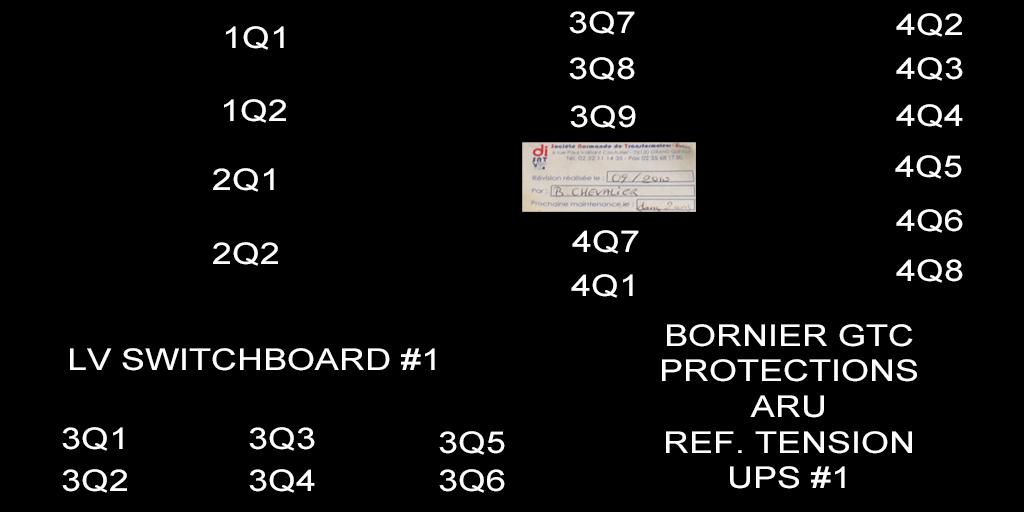
<style>
.page{position:relative;width:1024px;height:512px;background:#000000}
.page>*{position:absolute;margin:0}
.t1{font:30px "ArialMT";color:#ffffff;scale:1.2 1}
.t2{font:30px/35.7px "ArialMT";color:#ffffff;scale:1.2 1}
</style>
<div class="page">
<p class="t1" style="left:569px;top:11px;width:66px;height:24px">3Q7</p>
<p class="t1" style="left:896px;top:13px;width:66px;height:24px">4Q2</p>
<p class="t1" style="left:226px;top:26px;width:58px;height:24px">1Q1</p>
<p class="t1" style="left:569px;top:57px;width:66px;height:24px">3Q8</p>
<p class="t1" style="left:896px;top:57px;width:67px;height:24px">4Q3</p>
<p class="t1" style="left:224px;top:99px;width:62px;height:24px">1Q2</p>
<p class="t1" style="left:570px;top:105px;width:66px;height:24px">3Q9</p>
<p class="t1" style="left:896px;top:104px;width:67px;height:24px">4Q4</p>
<p class="t1" style="left:895px;top:155px;width:67px;height:24px">4Q5</p>
<p class="t1" style="left:213px;top:168px;width:61px;height:24px">2Q1</p>
<p class="t1" style="left:896px;top:209px;width:67px;height:24px">4Q6</p>
<p class="t1" style="left:572px;top:230px;width:67px;height:24px">4Q7</p>
<p class="t1" style="left:213px;top:242px;width:65px;height:24px">2Q2</p>
<p class="t1" style="left:896px;top:259px;width:67px;height:24px">4Q8</p>
<p class="t1" style="left:571px;top:274px;width:62px;height:24px">4Q1</p>
<p class="t2" style="left:662px;top:324px;width:255px;height:165px;text-align:center">BORNIER GTC<br>PROTECTIONS<br>ARU<br>REF. TENSION<br>UPS #1</p>
<p class="t1" style="left:70px;top:348px;width:365px;height:23px">LV SWITCHBOARD #1</p>
<p class="t1" style="left:62px;top:427px;width:61px;height:24px">3Q1</p>
<p class="t1" style="left:249px;top:427px;width:66px;height:24px">3Q3</p>
<p class="t1" style="left:439px;top:431px;width:66px;height:24px">3Q5</p>
<p class="t1" style="left:62px;top:469px;width:65px;height:24px">3Q2</p>
<p class="t1" style="left:249px;top:469px;width:66px;height:24px">3Q4</p>
<p class="t1" style="left:439px;top:469px;width:66px;height:24px">3Q6</p>
</div>
